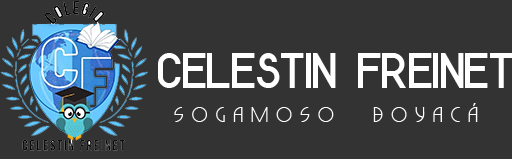
<style>
.page{position:relative;width:512px;height:159px;background:#333333}
.page>*{position:absolute;margin:0}
.t1{font:51.3px "ModernSansSerif7";color:#ffffff}
.t2{font:20.5px "LightSansSerif7";color:#ffffff}
</style>
<div class="page">
<p class="t1" style="left:158px;top:53px;width:355px;height:35px">CELESTIN FREINET</p>
<p class="t2" style="left:174px;top:103px;width:304px;height:19px">S O G A M O S O     B O Y A C Á</p>
</div>
